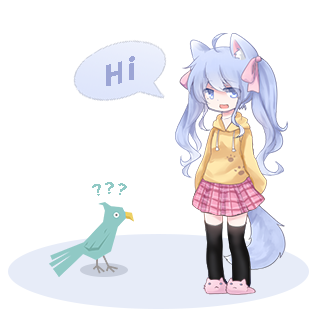
<style>
.page{position:relative;width:312px;height:312px;background:#ffffff}
.page>*{position:absolute;margin:0}
.t1{font:27.7px "NotoSansCJKtc-Bold";letter-spacing:0.12em;color:#9ca5d5}
.t2{font:13.7px "NotoSansCJKtc-Light";letter-spacing:0.12em;color:#90c9c5;scale:0.95 1}
</style>
<div class="page">
<p class="t1" style="left:106px;top:56px;width:29px;height:30px">Hi</p>
<p class="t2" style="left:92px;top:182px;width:35px;height:14px">???</p>
</div>
